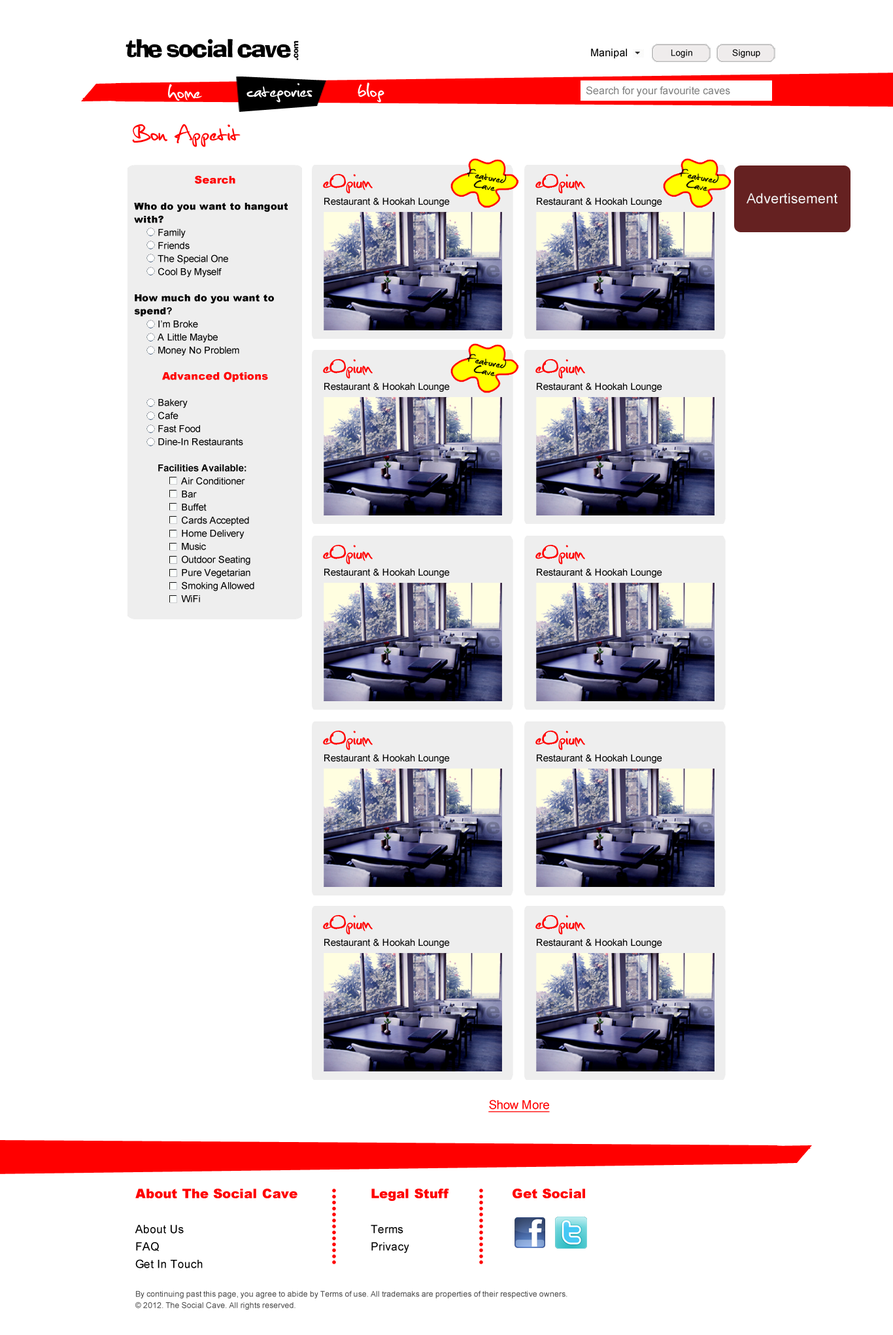
<style>
.page{position:relative;width:893px;height:1335px;background:#ffffff}
.page>*{position:absolute;margin:0}
.t1{font:26.2px "Christopherhand";letter-spacing:0.005em;color:#ffffff}
.t2{font:30.5px "Christopherhand";letter-spacing:0.005em;color:#ff0000}
.t3{font:26.2px "Christopherhand";letter-spacing:0.005em;color:#ff0000}
.t4{font:9.6px/13.1px "ArialMT";letter-spacing:0.005em;color:#000000}
.t5{font:10.5px/13.1px "Arial-Black";letter-spacing:0.005em;color:#ff0000}
.t6{font:9.6px/13.1px "Arial-Black";letter-spacing:0.005em;color:#000000}
.t7{font:9.6px/13.1px "Arial-BoldMT";letter-spacing:0.005em;color:#000000}
.t8{font:9.6px "ArialMT";letter-spacing:0.005em;color:#000000}
.t9{font:12.2px "ArialMT";letter-spacing:0.005em;color:#ff0000;text-decoration:underline}
.t10{font:7.8px/11.3px "ArialMT";letter-spacing:0.005em;color:#454545}
.t11{font:13.1px/17.4px "Arial-Black";letter-spacing:0.005em;color:#ff0000}
.t12{font:11.3px/17.4px "ArialMT";letter-spacing:0.005em;color:#000000}
</style>
<div class="page">
<p class="t1" style="left:168px;top:84px;width:34px;height:17px">home</p>
<p class="t1" style="left:247px;top:83px;width:66px;height:20px">categories</p>
<p class="t1" style="left:358px;top:82px;width:27px;height:21px">blog</p>
<p class="t2" style="left:132px;top:124px;width:109px;height:23px">Bon Appetit</p>
<p class="t3" style="left:323px;top:174px;width:50px;height:20px">eOpium</p>
<p class="t4" style="left:134px;top:175px;width:154px;height:427px;text-align:center"><span class="t5">Search<br><br></span><span class="t6">Who do you want to hangout with?<br></span> Family<br> Friends<br> The Special One<br> Cool By Myself<br><br><span class="t6">How much do you want to spend</span><span class="t7">?<br></span> I’m Broke<br> A Little Maybe<br> Money No Problem<br><br><span class="t5">Advanced Options<br><br></span> Bakery<br> Cafe<br> Fast Food<br> Dine-In Restaurants<br><span class="t7"> <br> Facilities Available:<br></span>  Air Conditioner<br>  Bar <br>  Buffet<br>  Cards Accepted<br>  Home Delivery<br>  Music<br>  Outdoor Seating<br>  Pure Vegetarian<br>  Smoking Allowed<br>  WiFi</p>
<p class="t8" style="left:324px;top:198px;width:126px;height:9px">Restaurant &amp; Hookah Lounge</p>
<p class="t9" style="left:489px;top:1099px;width:61px;height:13px">Show More</p>
<p class="t10" style="left:135px;top:1188px;width:450px;height:122px"><span class="t11">About The Social Cave    Legal Stuff   Get Social<br><br></span><span class="t12">About Us        Terms<br>FAQ         Privacy<br>Get In Touch<br><br></span>By continuing past this page, you agree to abide by Terms of use. All trademaks are properties of their respective owners.<br>© 2012. The Social Cave. All rights reserved.</p>
</div>
